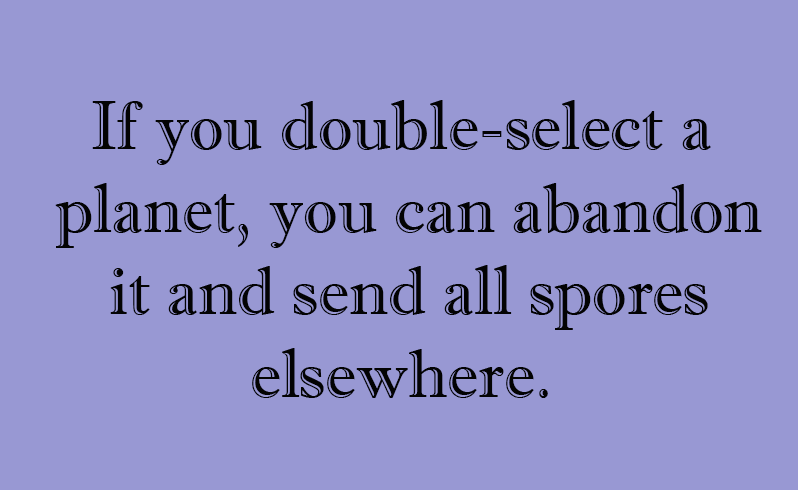
<style>
.page{position:relative;width:798px;height:490px;background:#9898d3}
.page>*{position:absolute;margin:0}
.t1{font:68.7px "ImprintMT-Shadow";color:#030303}
</style>
<div class="page">
<p class="t1" style="left:55px;top:100px;width:707px;height:298px;text-align:center">If you double-select a <br>planet, you can abandon<br>it and send all spores<br>elsewhere.</p>
</div>
